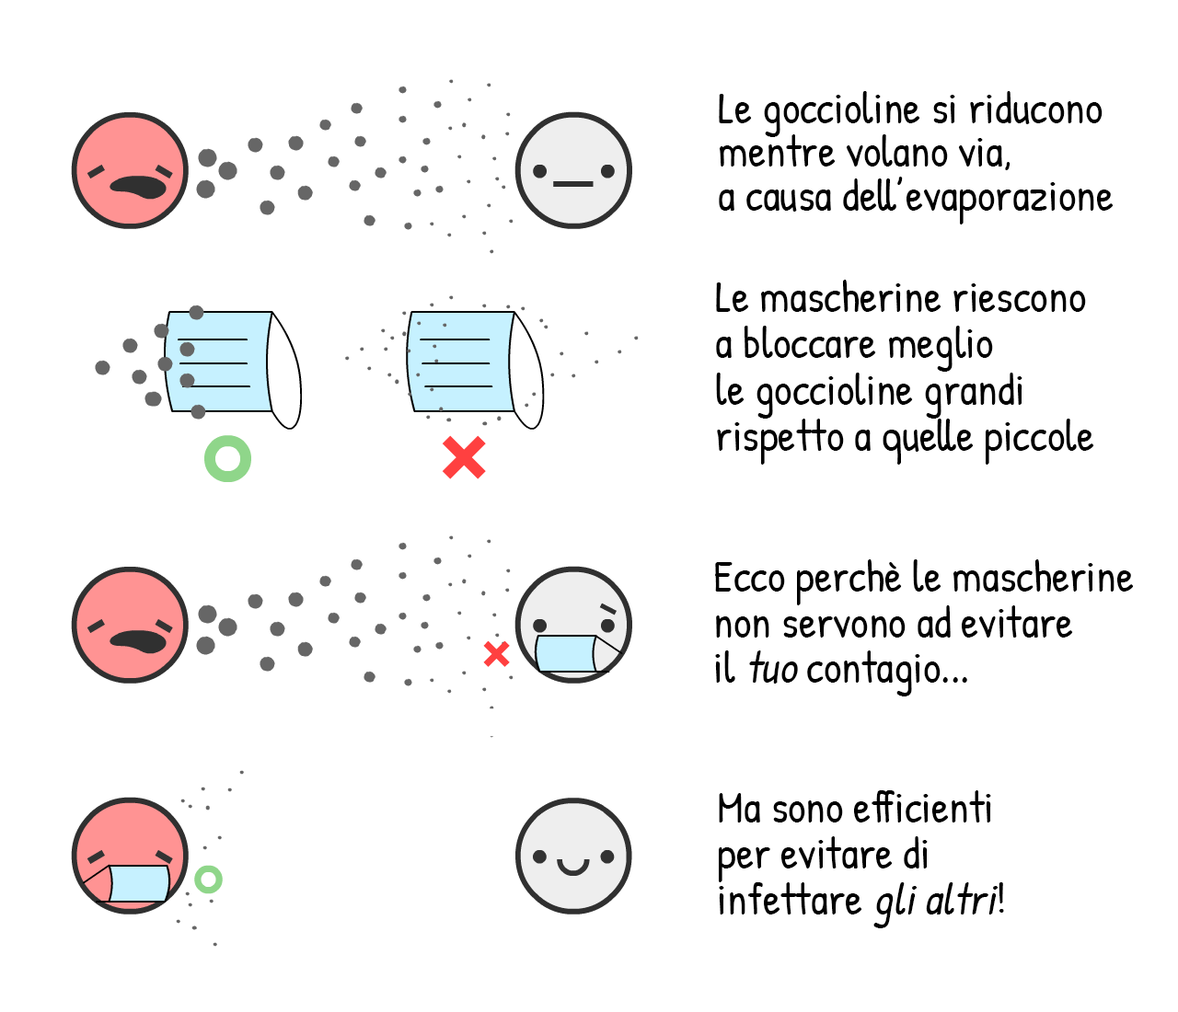
<style>
.page{position:relative;width:1178px;height:1012px;background:#ffffff}
.page>*{position:absolute;margin:0}
.t1{font:44.2px/43.8px "PatrickHand-Regular";color:#000000}
.t2{font:44.2px/46.6px "PatrickHand-Regular";color:#000000}
.t3{font:44.2px/45.7px "PatrickHand-Regular";color:#000000}
.t4{font:44.2px/45.7px "PatrickHand-Regular";color:#000000;font-style:italic}
.t5{font:44.2px/46px "PatrickHand-Regular";color:#000000}
.t6{font:44.2px/46px "PatrickHand-Regular";color:#000000;font-style:italic}
</style>
<div class="page">
<p class="t1" style="left:719px;top:91px;width:395px;height:134px">Le goccioline si riducono <br>mentre volano via, <br>a causa dell’evaporazione</p>
<p class="t2" style="left:716px;top:280px;width:378px;height:185px">Le mascherine riescono<br>a bloccare meglio <br>le goccioline grandi<br>rispetto a quelle piccole</p>
<p class="t3" style="left:715px;top:560px;width:419px;height:137px">Ecco perchè le mascherine<br>non servono ad evitare <br>il <span class="t4">tuo</span> contagio...</p>
<p class="t5" style="left:719px;top:791px;width:285px;height:138px">Ma sono efficienti<br>per evitare di <br>infettare <span class="t6">gli altri</span>!</p>
</div>
